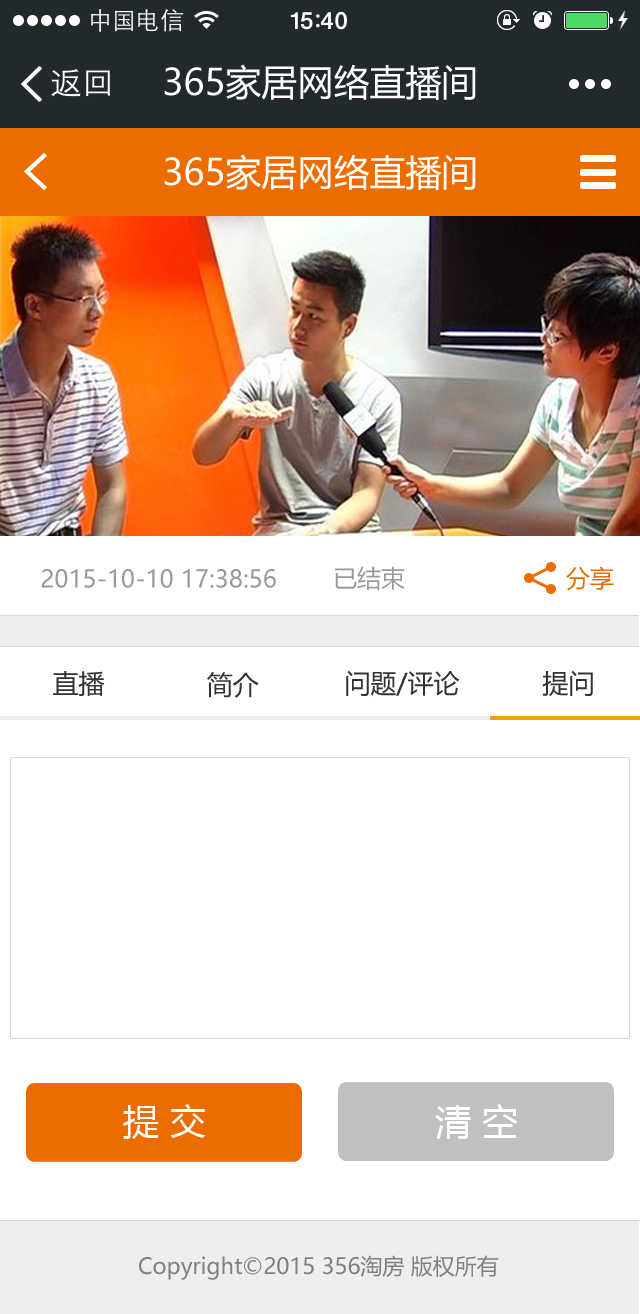
<style>
.page{position:relative;width:640px;height:1314px;background:#ffffff}
.page>*{position:absolute;margin:0}
.t1{font:36px "MicrosoftYaHei";color:#ffffff}
.t2{font:24px "MicrosoftYaHei";color:#999999}
.t3{font:24px "MicrosoftYaHei";color:#ec6c00}
.t4{font:26px "MicrosoftYaHei";color:#333333}
.t5{font:22px "MicrosoftYaHei";color:#808080}
</style>
<div class="page">
<p class="t1" style="left:164px;top:64px;width:312px;height:36px">365家居网络直播间</p>
<p class="t1" style="left:164px;top:154px;width:312px;height:36px">365家居网络直播间</p>
<p class="t2" style="left:41px;top:569px;width:235px;height:19px">2015-10-10 17:38:56</p>
<p class="t2" style="left:335px;top:566px;width:70px;height:24px">已结束</p>
<p class="t3" style="left:566px;top:566px;width:48px;height:25px">分享</p>
<p class="t4" style="left:53px;top:671px;width:52px;height:25px">直播</p>
<p class="t4" style="left:207px;top:672px;width:52px;height:26px">简介</p>
<p class="t4" style="left:346px;top:670px;width:114px;height:27px">问题/评论</p>
<p class="t4" style="left:542px;top:670px;width:51px;height:26px">提问</p>
<p class="t1" style="left:123px;top:1104px;width:83px;height:35px">提 交</p>
<p class="t1" style="left:435px;top:1104px;width:83px;height:35px">清 空</p>
<p class="t5" style="left:139px;top:1255px;width:360px;height:25px">Copyright©2015 356淘房 版权所有</p>
</div>
